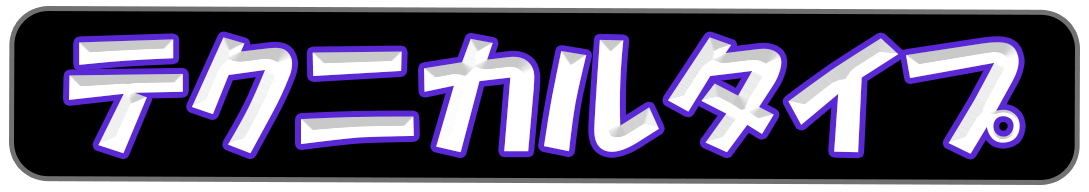
<style>
.page{position:relative;width:1089px;height:192px;background:#000000}
.page>*{position:absolute;margin:0}
.t1{font:130.2px "HGPSoeiKakupoptai";letter-spacing:0.025em;color:#ffffff}
</style>
<div class="page">
<p class="t1" style="left:69px;top:37px;width:951px;height:117px">テクニカルタイプ</p>
</div>
